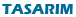
<style>
.page{position:relative;width:76px;height:17px;background:#ffffff}
.page>*{position:absolute;margin:0}
.t1{font:15px "ErasITC-Bold";color:#006c95}
</style>
<div class="page">
<p class="t1" style="left:2px;top:4px;width:71px;height:10px">TASARIM</p>
</div>
